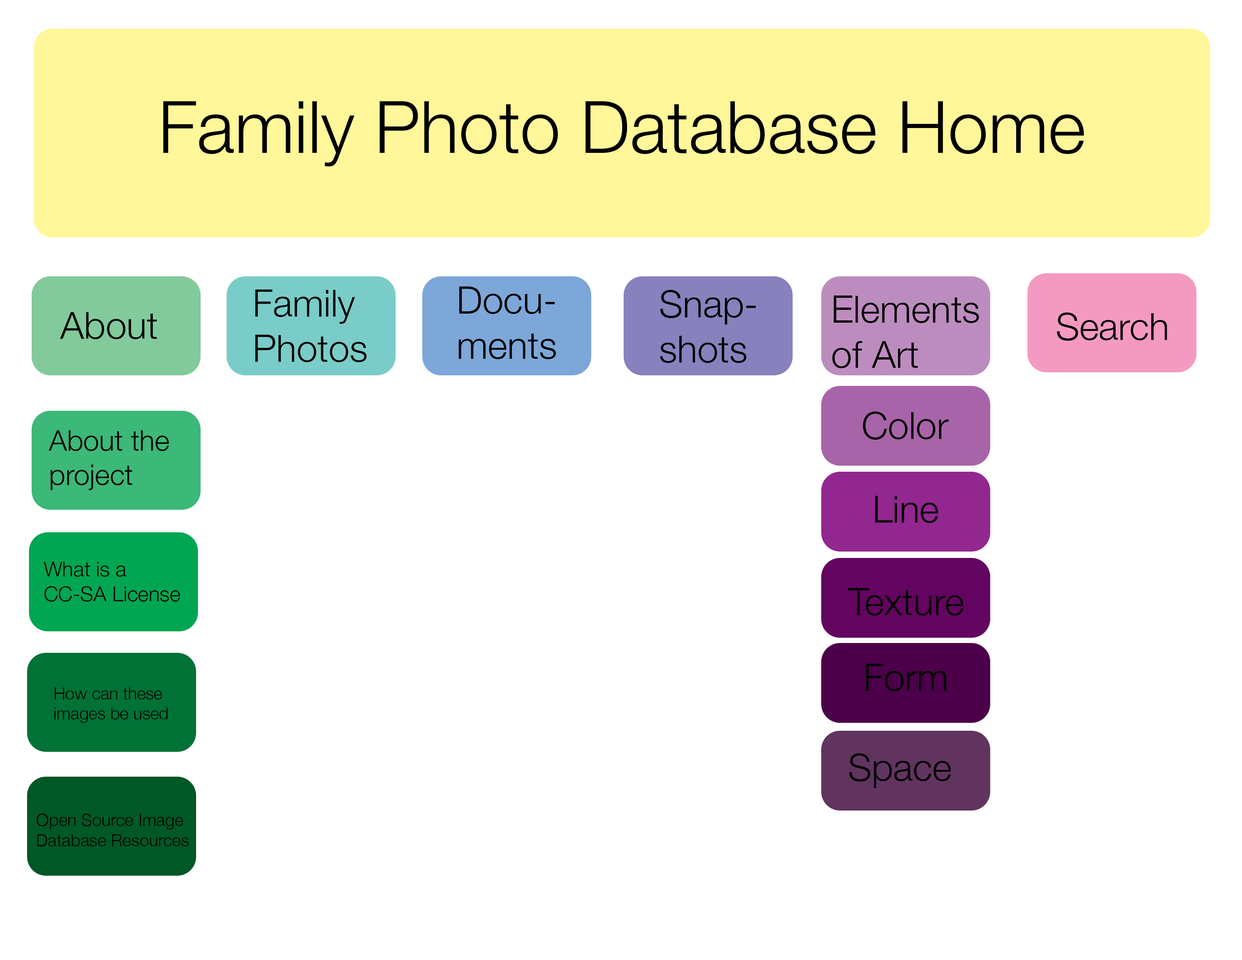
<style>
.page{position:relative;width:1242px;height:960px;background:#ffffff}
.page>*{position:absolute;margin:0}
.t1{font:72.2px "HelveticaNeue-Light";color:#000000}
.t2{font:37.6px "HelveticaNeue-Light";color:#000000}
.t3{font:28.5px "HelveticaNeue-Light";color:#000000}
.t4{font:20.7px "HelveticaNeue-Light";color:#000000}
.t5{font:16.8px "HelveticaNeue-Light";color:#000000}
.t6{font:17.1px "HelveticaNeue-Light";color:#000000}
</style>
<div class="page">
<p class="t1" style="left:163px;top:101px;width:921px;height:65px">Family Photo Database Home</p>
<p class="t2" style="left:255px;top:289px;width:112px;height:73px">Family <br>Photos</p>
<p class="t2" style="left:458px;top:286px;width:98px;height:73px">Docu-<br>ments</p>
<p class="t2" style="left:660px;top:290px;width:96px;height:73px">Snap-<br>shots</p>
<p class="t2" style="left:832px;top:296px;width:147px;height:72px">Elements<br>of Art</p>
<p class="t2" style="left:60px;top:312px;width:97px;height:27px">About</p>
<p class="t2" style="left:1057px;top:312px;width:110px;height:29px">Search</p>
<p class="t2" style="left:863px;top:411px;width:86px;height:29px">Color</p>
<p class="t3" style="left:49px;top:430px;width:120px;height:60px">About the <br>project</p>
<p class="t2" style="left:875px;top:496px;width:63px;height:27px">Line</p>
<p class="t4" style="left:44px;top:562px;width:136px;height:40px">What is a <br>CC-SA License</p>
<p class="t2" style="left:848px;top:588px;width:116px;height:27px">Texture</p>
<p class="t2" style="left:866px;top:664px;width:81px;height:27px">Form</p>
<p class="t5" style="left:54px;top:687px;width:114px;height:36px">How can these <br>images be used</p>
<p class="t2" style="left:849px;top:753px;width:102px;height:35px">Space</p>
<p class="t6" style="left:37px;top:813px;width:152px;height:33px">Open Source Image <br>Database Resources</p>
</div>
